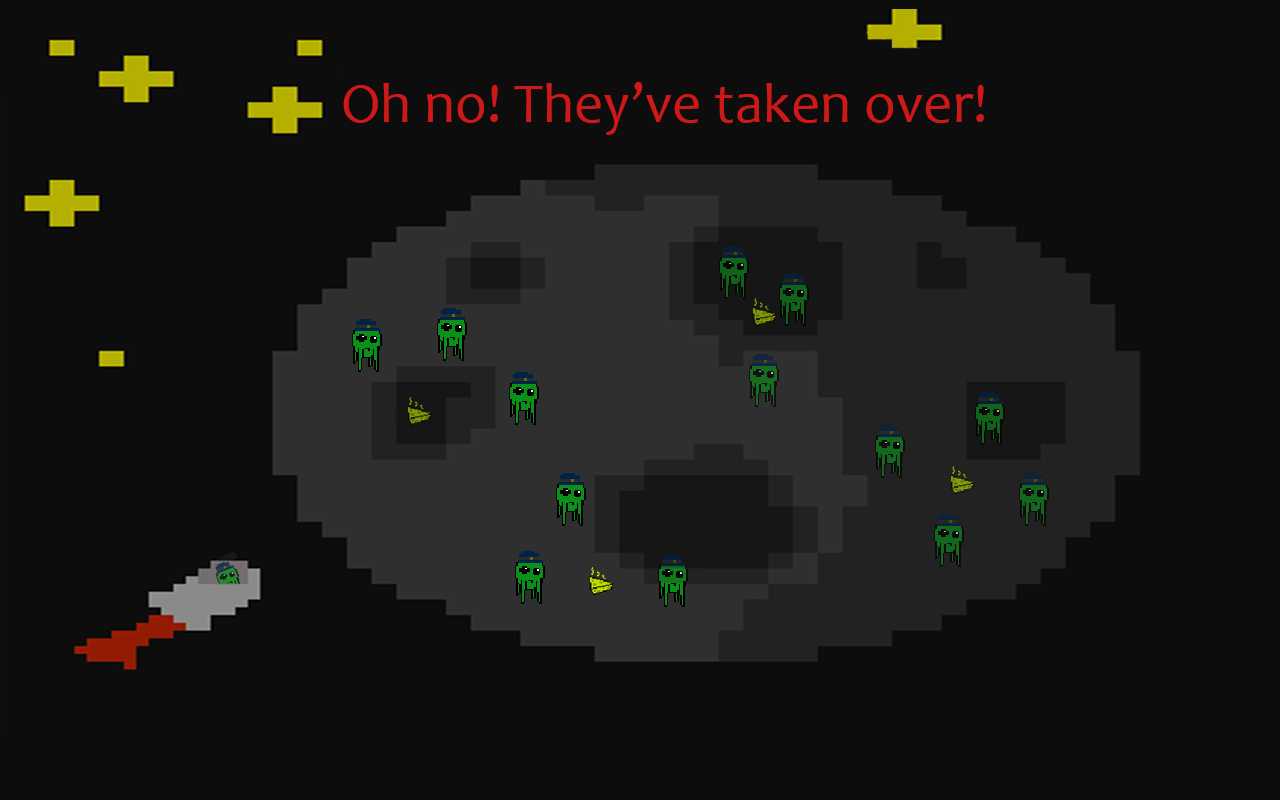
<style>
.page{position:relative;width:1280px;height:800px;background:#0d0d0d}
.page>*{position:absolute;margin:0}
.t1{font:57.3px "Candara";color:#cf1818}
</style>
<div class="page">
<p class="t1" style="left:343px;top:82px;width:641px;height:53px">Oh no! They’ve taken over!</p>
</div>
